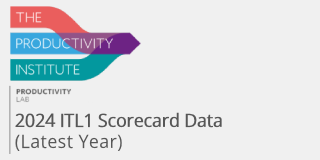
<style>
.page{position:relative;width:320px;height:160px;background:#f0f0f0}
.page>*{position:absolute;margin:0}
.t1{font:18.6px "OpenSans-Regular";letter-spacing:-0.037em;color:#575757;font-weight:bold;scale:0.96 1}
.t2{font:18.6px "OpenSans-Regular";letter-spacing:0.02em;color:#575757;scale:0.96 1}
</style>
<div class="page">
<p class="t1" style="left:15px;top:112px;width:207px;height:39px">2024 ITL1 Scorecard Data<br><span class="t2">(Latest Year)</span></p>
</div>
